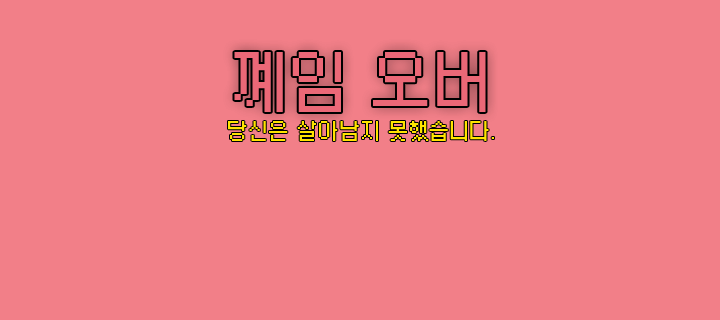
<style>
.page{position:relative;width:720px;height:320px;background:#f27f88}
.page>*{position:absolute;margin:0}
.t1{font:72px "morris9";letter-spacing:-0.025em;color:#eb6877}
.t2{font:24px "morris9";letter-spacing:-0.025em;color:#ffe400}
</style>
<div class="page">
<p class="t1" style="left:234px;top:52px;width:252px;height:60px">꼐임 오버</p>
<p class="t2" style="left:228px;top:121px;width:266px;height:20px">당신은 살아남지 못했습니다.</p>
</div>
